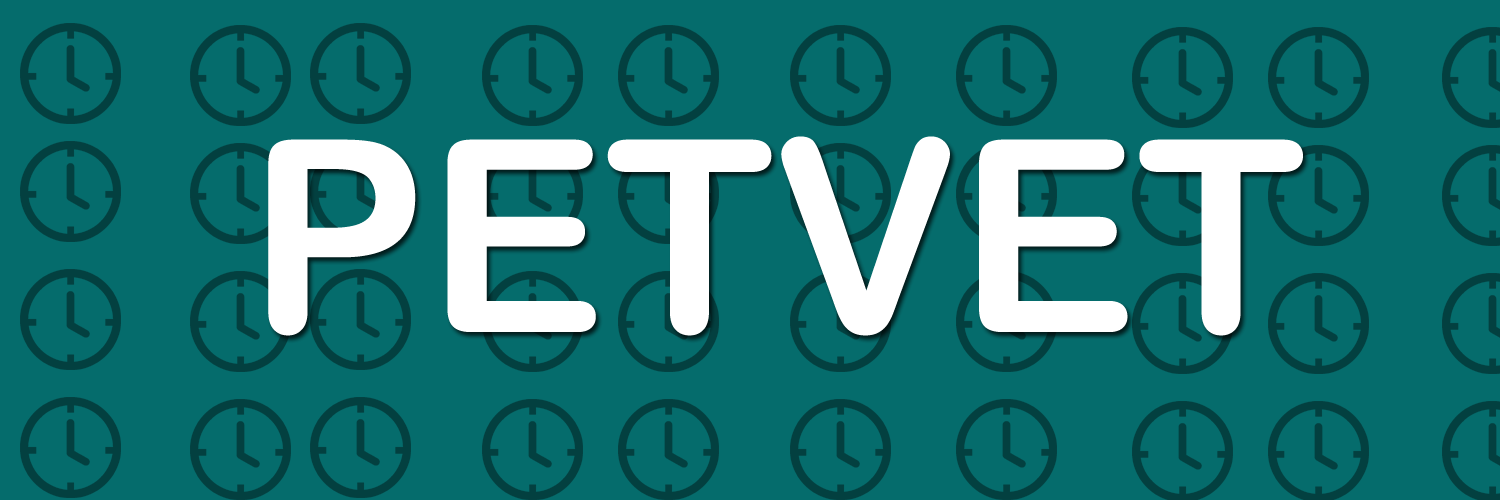
<style>
.page{position:relative;width:1500px;height:500px;background:#056c6c}
.page>*{position:absolute;margin:0}
.t1{font:268.5px "ArialRoundedMTBold";color:#ffffff}
</style>
<div class="page">
<p class="t1" style="left:268px;top:136px;width:1035px;height:200px">PETVET</p>
</div>
